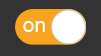
<style>
.page{position:relative;width:101px;height:56px;background:#333333}
.page>*{position:absolute;margin:0}
.t1{font:20.8px "ArialMT";color:#ffffff}
</style>
<div class="page">
<p class="t1" style="left:23px;top:21px;width:22px;height:11px">on</p>
</div>
